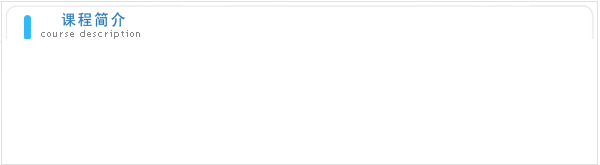
<style>
.page{position:relative;width:600px;height:165px;background:#ffffff}
.page>*{position:absolute;margin:0}
.t1{font:15.5px "SimHei";letter-spacing:0.1em;color:#2b7ab6}
.t2{font:10.3px "TrebuchetMS";letter-spacing:0.1em;color:#898888}
</style>
<div class="page">
<p class="t1" style="left:61px;top:12px;width:64px;height:15px">课程简介</p>
<p class="t2" style="left:41px;top:30px;width:99px;height:9px">course description</p>
</div>
